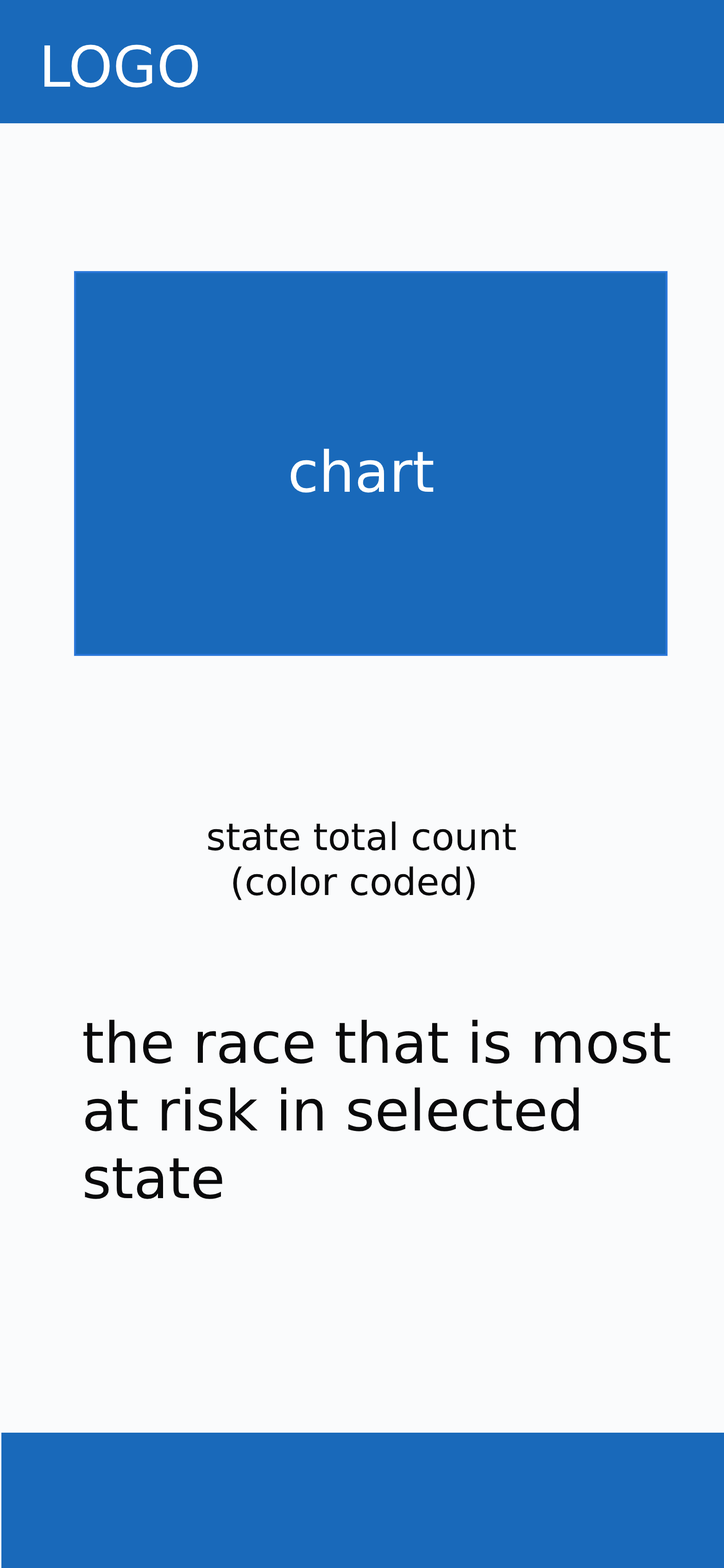
<style>
.page{position:relative;width:724px;height:1568px;background:#fafbfc}
.page>*{position:absolute;margin:0}
.t1{font:56.5px "DejaVuSans";color:#ffffff}
.t2{font:37.5px "DejaVuSans";color:#0a0a0b}
.t3{font:56.5px "DejaVuSans";color:#0a0a0b}
</style>
<div class="page">
<p class="t1" style="left:44px;top:44px;width:154px;height:44px">LOGO</p>
<p class="t1" style="left:291px;top:449px;width:143px;height:44px">chart</p>
<p class="t2" style="left:208px;top:821px;width:308px;height:79px">state total count<br>  (color coded)</p>
<p class="t3" style="left:83px;top:1020px;width:588px;height:179px">the race that is most at risk in selected state</p>
</div>
